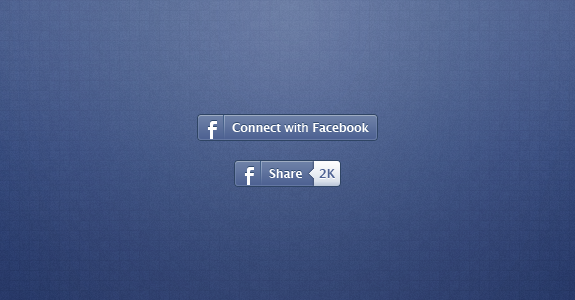
<style>
.page{position:relative;width:575px;height:300px}
.page>*{position:absolute;margin:0}
.t1{font:12px "LucidaGrande-Bold";letter-spacing:-0.015em;color:#ffffff}
.t2{font:12px "LucidaGrande";letter-spacing:-0.015em;color:#ffffff}
.t3{font:12px "LucidaGrande-Bold";letter-spacing:-0.015em;color:#4e6293}
</style>
<div class="page">
<p class="t1" style="left:232px;top:123px;width:137px;height:9px">Connect<span class="t2"> with </span>Facebook</p>
<p class="t1" style="left:269px;top:169px;width:33px;height:9px">Share</p>
<p class="t3" style="left:319px;top:169px;width:16px;height:9px">2K</p>
</div>
